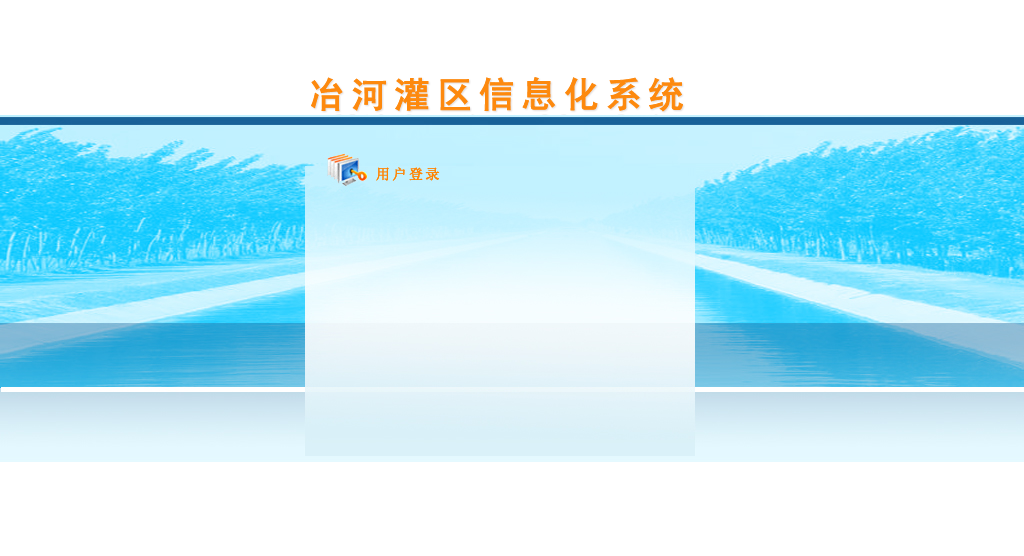
<style>
.page{position:relative;width:1024px;height:556px;background:#ffffff}
.page>*{position:absolute;margin:0}
.t1{font:36px "SimHei";letter-spacing:0.15em;color:#fd890e;font-weight:bold}
</style>
<div class="page">
<p class="t1" style="left:311px;top:77px;width:372px;height:35px">冶河灌区信息化系统</p>
</div>
